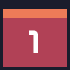
<style>
.page{position:relative;width:70px;height:70px;background:#b14156}
.page>*{position:absolute;margin:0}
.t1{font:36px "Kenney-Future";color:#ffffff}
</style>
<div class="page">
<p class="t1" style="left:29px;top:30px;width:9px;height:23px">1</p>
</div>
